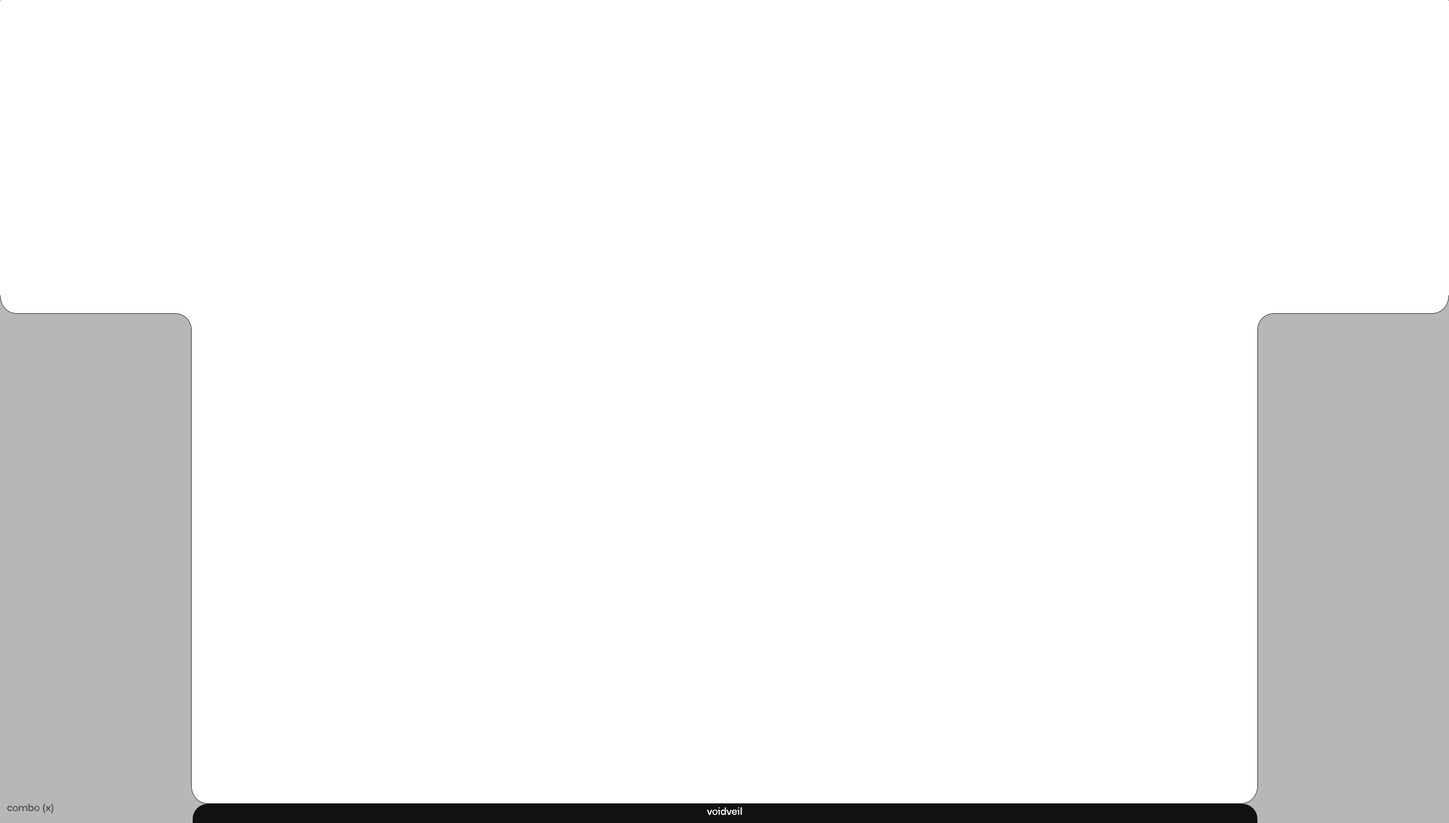
<style>
.page{position:relative;width:1449px;height:823px;background:#ffffff}
.page>*{position:absolute;margin:0}
.t1{font:10.4px "NeueRegrade-Semibold";color:#4a4a4a}
.t2{font:10.4px "NeueRegrade-Semibold";color:#ffffff}
</style>
<div class="page">
<p class="t1" style="left:7px;top:803px;width:47px;height:10px">combo (x)</p>
<p class="t2" style="left:707px;top:807px;width:35px;height:8px">voidveil</p>
</div>
